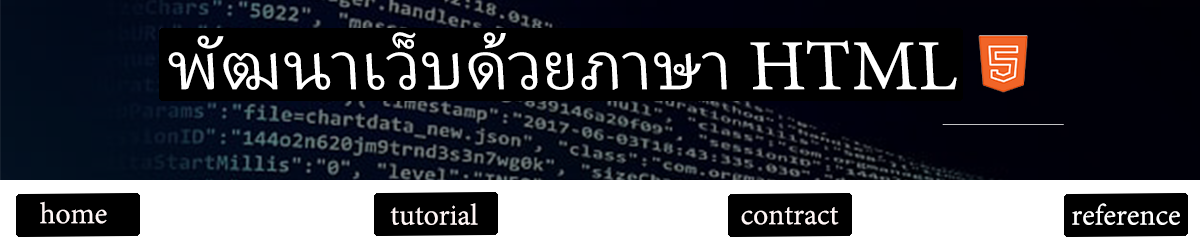
<style>
.page{position:relative;width:1200px;height:250px;background:#ffffff}
.page>*{position:absolute;margin:0}
.t1{font:87.1px "AdobeThai-Regular";color:#ffffff;scale:1.03 1}
.t2{font:36px "AdobeThai-Regular";color:#fff6f6}
.t3{font:36px "AdobeThai-Regular";color:#ffffff}
</style>
<div class="page">
<p class="t1" style="left:168px;top:32px;width:789px;height:58px">พัฒนาเว็บด้วยภาษา HTML</p>
<p class="t2" style="left:40px;top:201px;width:67px;height:23px">home</p>
<p class="t2" style="left:390px;top:203px;width:88px;height:22px">tutorial</p>
<p class="t2" style="left:741px;top:207px;width:98px;height:18px">contract</p>
<p class="t3" style="left:1072px;top:203px;width:108px;height:22px">reference</p>
</div>
